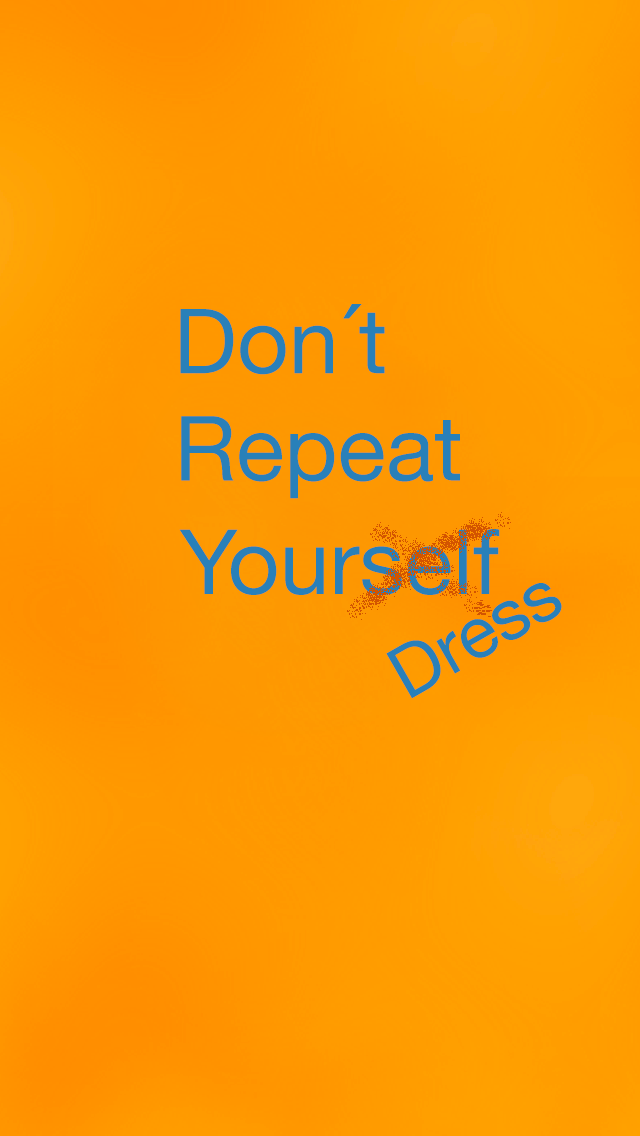
<style>
.page{position:relative;width:640px;height:1136px}
.page>*{position:absolute;margin:0}
.t1{font:90px "HelveticaNeue";color:#2980b9}
.t2{font:72px "HelveticaNeue";color:#2980b9}
</style>
<div class="page">
<p class="t1" style="left:180px;top:304px;width:205px;height:71px">Don´t</p>
<p class="t1" style="left:181px;top:416px;width:279px;height:83px">Repeat</p>
<p class="t1" style="left:179px;top:529px;width:321px;height:66px">Yourself</p>
<p class="t2" style="left:386px;top:583px;width:176px;height:116px;rotate:-30deg">Dress</p>
</div>
